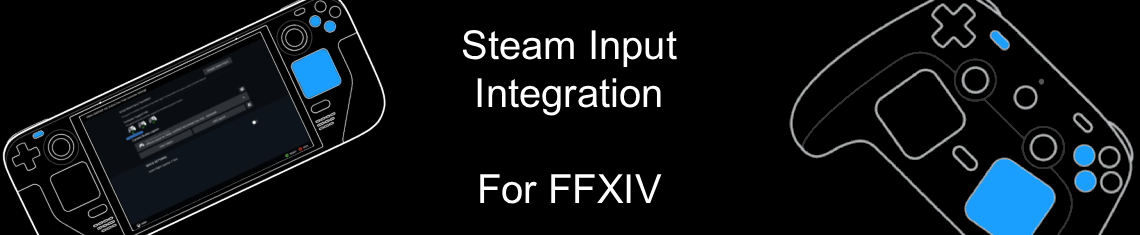
<style>
.page{position:relative;width:1140px;height:235px;background:#000000}
.page>*{position:absolute;margin:0}
.t1{font:40px "ArialMT";color:#ffffff}
</style>
<div class="page">
<p class="t1" style="left:462px;top:29px;width:215px;height:175px;text-align:center">Steam Input<br>Integration<br><br>For FFXIV</p>
</div>
